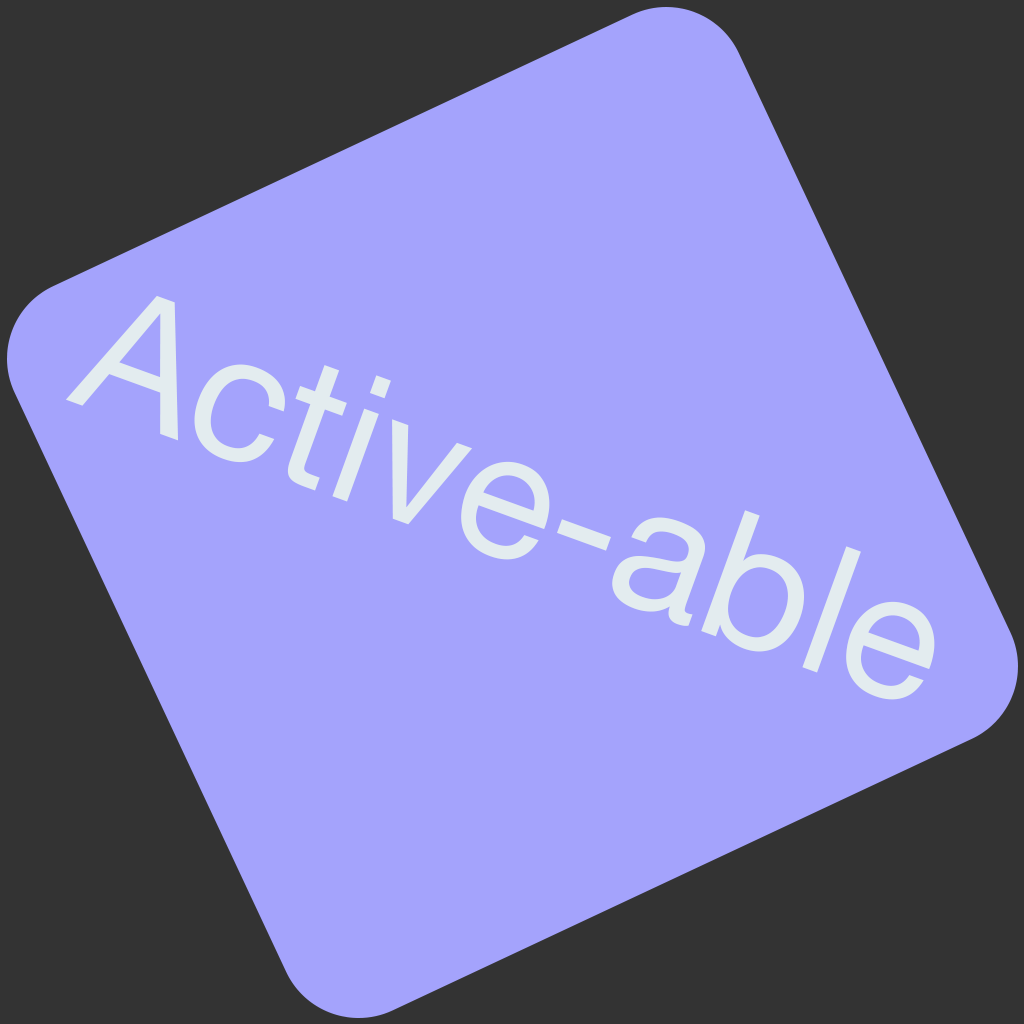
<style>
.page{position:relative;width:1024px;height:1024px;background:#a4a3fc}
.page>*{position:absolute;margin:0}
.t1{font:180px "HelveticaNeue";color:#e3ecef}
</style>
<div class="page">
<p class="t1" style="left:65px;top:295px;width:870px;height:405px;rotate:20deg">Active-able</p>
</div>
